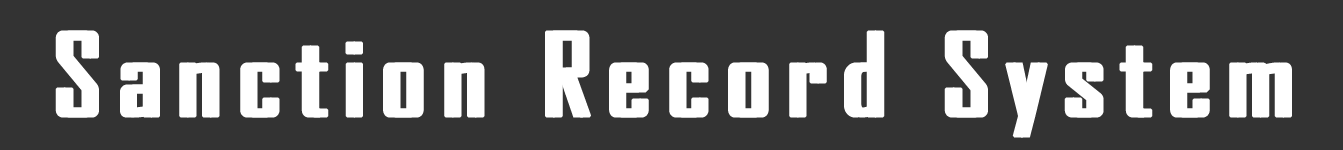
<style>
.page{position:relative;width:1343px;height:150px;background:#333333}
.page>*{position:absolute;margin:0}
.t1{font:110.4px "AgencyFB-Reg";letter-spacing:0.14em;color:#ffffff;font-weight:bold}
</style>
<div class="page">
<p class="t1" style="left:55px;top:30px;width:1230px;height:108px">Sanction Record System</p>
<p class="t1" style="left:62px;top:30px;width:1230px;height:108px">Sanction Record System</p>
</div>
